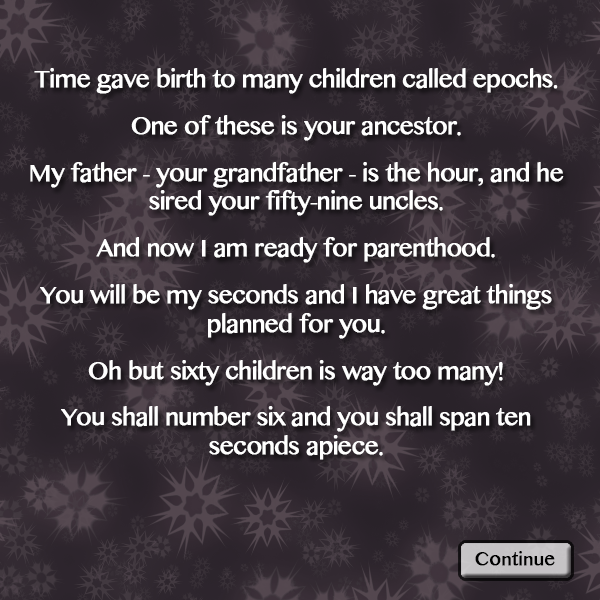
<style>
.page{position:relative;width:600px;height:600px}
.page>*{position:absolute;margin:0}
.t1{font:24px "LaoMN";letter-spacing:-0.04em;color:#ffffff;font-weight:bold}
.t2{font:18px "LaoMN";color:#000000;font-weight:bold}
</style>
<div class="page">
<p class="t1" style="left:30px;top:68px;width:534px;height:392px;text-align:center">Time gave birth to many children called epochs.<br>One of these is your ancestor.<br>My father - your grandfather - is the hour, and he sired your fifty-nine uncles.<br>And now I am ready for parenthood.<br>You will be my seconds and I have great things planned for you.<br>Oh but sixty children is way too many!<br>You shall number six and you shall span ten seconds apiece.</p>
<p class="t2" style="left:475px;top:551px;width:80px;height:15px">Continue</p>
</div>
